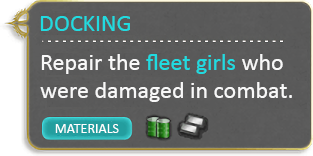
<style>
.page{position:relative;width:313px;height:156px}
.page>*{position:absolute;margin:0}
.t1{font:24px "Calibri";color:#20dbe0}
.t2{font:24px "Calibri";color:#f8f8f8}
.t3{font:14px "Calibri";color:#ffffff}
</style>
<div class="page">
<p class="t1" style="left:40px;top:16px;width:90px;height:15px">DOCKING</p>
<p class="t2" style="left:40px;top:54px;width:252px;height:48px">Repair the <span class="t1">fleet girls</span> who<br>were damaged in combat.</p>
<p class="t3" style="left:55px;top:124px;width:64px;height:9px">MATERIALS</p>
</div>
